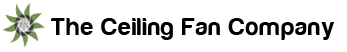
<style>
.page{position:relative;width:347px;height:52px;background:#ffffff}
.page>*{position:absolute;margin:0}
.t1{font:25.3px "Harabara";letter-spacing:0.05em;color:#000000}
</style>
<div class="page">
<p class="t1" style="left:51px;top:18px;width:284px;height:22px">The Ceiling Fan Company</p>
</div>
